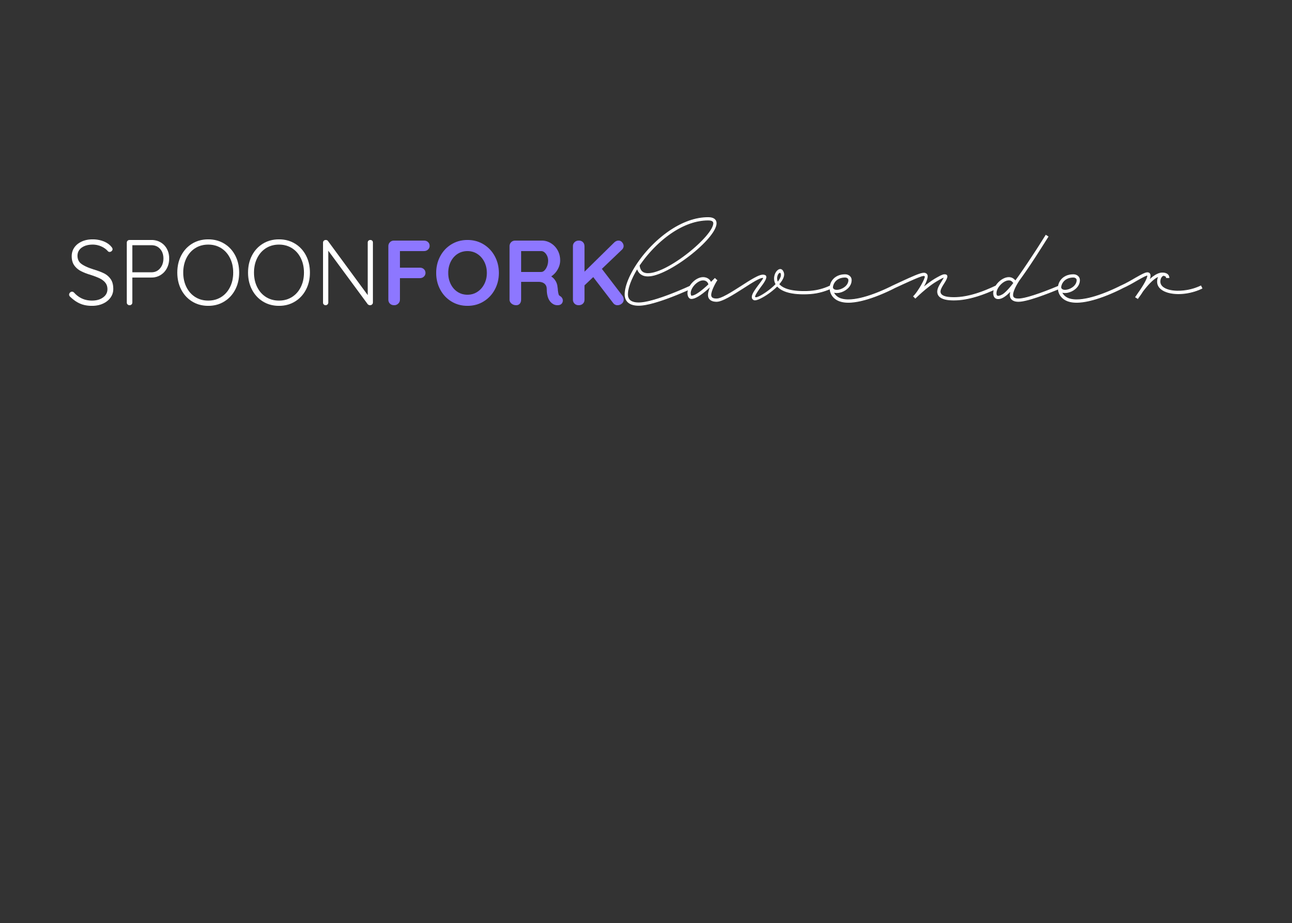
<style>
.page{position:relative;width:1292px;height:923px;background:#333333}
.page>*{position:absolute;margin:0}
.t1{font:123.1px "Mina-Regular";color:#ffffff}
.t2{font:92.3px "Quicksand-Regular";color:#ffffff}
.t3{font:92.3px "Quicksand-Bold";color:#8d77ff}
</style>
<div class="page">
<p class="t1" style="left:624px;top:217px;width:579px;height:89px">lavender</p>
<p class="t2" style="left:69px;top:239px;width:555px;height:67px">SPOON<span class="t3">FORK</span></p>
</div>
